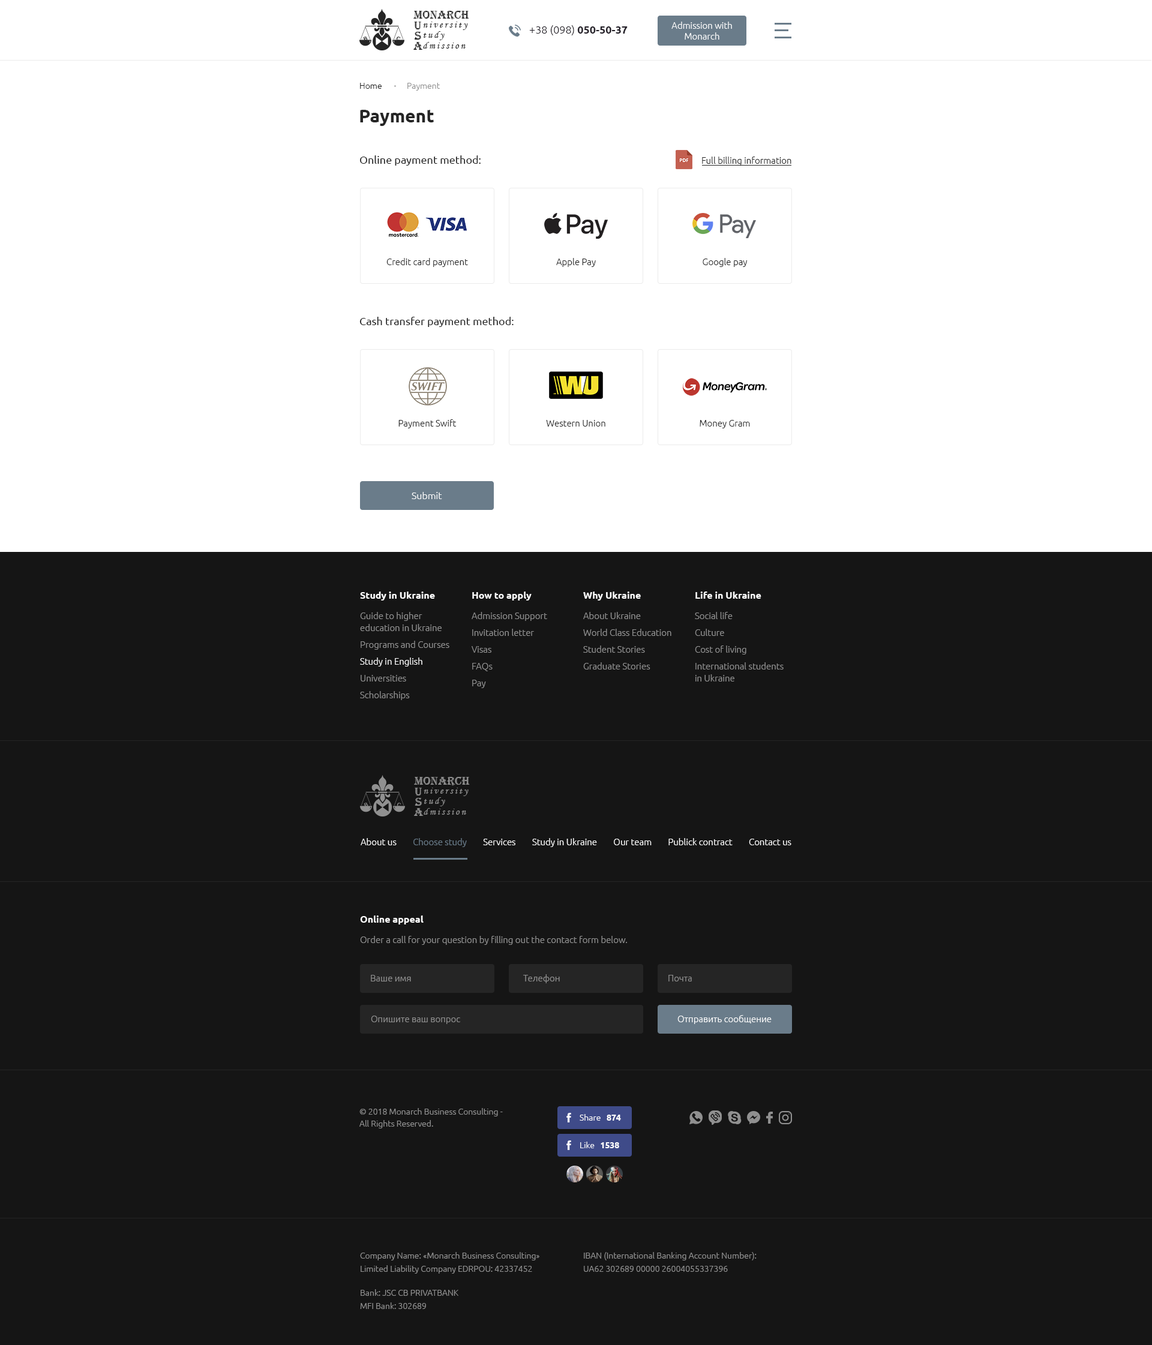
<style>
.page{position:relative;width:1152px;height:1345px;background:#151515}
.page>*{position:absolute;margin:0}
.t1{font:12px "Algerian";color:#252525}
.t2{font:9.6px "MonotypeCorsiva";letter-spacing:0.19em;color:#252525}
.t3{font:10.8px "Ubuntu-Light";color:#242028}
.t4{font:10.8px "Ubuntu-Bold";color:#242028}
.t5{font:9px/10.8px "Ubuntu-Light";color:#ffffff}
.t6{font:8.4px "Ubuntu-Light";color:#909090}
.t7{font:8.4px "Ubuntu-Light";color:#202020}
.t8{font:18px "Ubuntu-Bold";color:#252525}
.t9{font:10.8px "Ubuntu";color:#252525}
.t10{font:9px "Ubuntu-Light";color:#252525}
.t11{font:9.6px "Ubuntu-Light";color:#ffffff}
.t12{font:9px/16.8px "Ubuntu-Light";color:#909090}
.t13{font:9.6px/12px "Ubuntu-Bold";color:#ffffff}
.t14{font:9px/20.4px "Ubuntu-Light";color:#909090}
.t15{font:9px/12px "Ubuntu-Light";color:#909090}
.t16{font:9px/16.8px "Ubuntu-Light";color:#ffffff}
.t17{font:12px "Algerian";color:#909090}
.t18{font:9.6px "MonotypeCorsiva";letter-spacing:0.19em;color:#909090}
.t19{font:9px "Ubuntu-Light";color:#ffffff}
.t20{font:9px "Ubuntu-Light";color:#6a7c8a}
.t21{font:9px "Ubuntu-Light";color:#909090}
.t22{font:8.4px/12px "Ubuntu-Light";color:#909090}
.t23{font:8.4px "Ubuntu-Light";color:#ffffff}
.t24{font:8.4px "Ubuntu-Bold";color:#ffffff}
.t25{font:8.4px/13.2px "Ubuntu-Light";color:#909090}
</style>
<div class="page">
<p class="t1" style="left:413px;top:11px;width:56px;height:9px">MONARCH</p>
<p class="t1" style="left:414px;top:22px;width:7px;height:7px">U</p>
<p class="t2" style="left:423px;top:22px;width:45px;height:8px">niversity</p>
<p class="t3" style="left:529px;top:25px;width:99px;height:10px">+38 (098) <span class="t4">050-50-37</span></p>
<p class="t5" style="left:671px;top:22px;width:61px;height:18px;text-align:center">Admission with <br>Monarch</p>
<p class="t1" style="left:414px;top:32px;width:7px;height:8px">S</p>
<p class="t2" style="left:424px;top:31px;width:21px;height:9px">tudy</p>
<p class="t1" style="left:413px;top:42px;width:10px;height:8px">A</p>
<p class="t2" style="left:423px;top:42px;width:43px;height:7px">dmission</p>
<p class="t6" style="left:360px;top:83px;width:80px;height:8px"><span class="t7">Home             </span>Payment</p>
<p class="t8" style="left:360px;top:110px;width:74px;height:16px">Payment</p>
<p class="t9" style="left:360px;top:155px;width:121px;height:11px">Online payment method:</p>
<p class="t10" style="left:702px;top:157px;width:89px;height:9px">Full billing information</p>
<p class="t10" style="left:386px;top:258px;width:82px;height:9px">Credit card payment</p>
<p class="t10" style="left:556px;top:258px;width:40px;height:9px">Apple Pay</p>
<p class="t10" style="left:703px;top:258px;width:45px;height:9px">Google pay</p>
<p class="t9" style="left:359px;top:317px;width:155px;height:10px">Cash transfer payment method:</p>
<p class="t10" style="left:398px;top:419px;width:59px;height:9px">Payment Swift</p>
<p class="t10" style="left:546px;top:420px;width:59px;height:7px">Western Union</p>
<p class="t10" style="left:700px;top:420px;width:50px;height:8px">Money Gram</p>
<p class="t11" style="left:412px;top:492px;width:30px;height:7px">Submit</p>
<p class="t12" style="left:360px;top:592px;width:89px;height:108px"><span class="t13">Study in Ukraine<br></span><span class="t14">Guide to higher <br></span><span class="t15">education in Ukraine<br></span>Programs and Courses<br><span class="t16">Study in English<br></span>Universities<br>Scholarships</p>
<p class="t12" style="left:472px;top:592px;width:75px;height:96px"><span class="t13">How to apply<br></span><span class="t14">Admission Support<br></span>Invitation letter<br>Visas<br>FAQs<br>Pay</p>
<p class="t12" style="left:583px;top:592px;width:88px;height:78px"><span class="t13">Why Ukraine<br></span><span class="t14">About Ukraine<br></span>World Class Education<br>Student Stories<br>Graduate Stories</p>
<p class="t12" style="left:695px;top:592px;width:89px;height:90px"><span class="t13">Life in Ukraine<br></span><span class="t14">Social life<br></span>Culture<br>Cost of living<br>International students <br><span class="t15">in Ukraine</span></p>
<p class="t17" style="left:414px;top:777px;width:56px;height:9px">MONARCH</p>
<p class="t17" style="left:415px;top:798px;width:7px;height:8px">S</p>
<p class="t17" style="left:415px;top:788px;width:7px;height:8px">U</p>
<p class="t18" style="left:424px;top:788px;width:45px;height:8px">niversity</p>
<p class="t18" style="left:424px;top:797px;width:21px;height:9px">tudy</p>
<p class="t17" style="left:414px;top:808px;width:10px;height:8px">A</p>
<p class="t18" style="left:424px;top:808px;width:42px;height:7px">dmission</p>
<p class="t19" style="left:361px;top:838px;width:430px;height:9px">About us        <span class="t20">Choose study</span>        Services        Study in Ukraine        Our team        Publick contract        Contact us</p>
<p class="t14" style="left:360px;top:916px;width:267px;height:29px"><span class="t13">Online appeal<br></span>Order a call for your question by filling out the contact form below.</p>
<p class="t21" style="left:371px;top:975px;width:40px;height:7px">Ваше имя</p>
<p class="t21" style="left:523px;top:974px;width:37px;height:9px">Телефон</p>
<p class="t21" style="left:668px;top:975px;width:24px;height:7px">Почта</p>
<p class="t21" style="left:371px;top:1016px;width:89px;height:8px">Опишите ваш вопрос</p>
<p class="t19" style="left:677px;top:1015px;width:95px;height:9px">Отправить сообщение</p>
<p class="t22" style="left:359px;top:1108px;width:144px;height:21px">© 2018 Monarch Business Consulting - <br>All Rights Reserved.</p>
<p class="t23" style="left:580px;top:1114px;width:41px;height:7px">Share   <span class="t24">874</span></p>
<p class="t23" style="left:580px;top:1142px;width:39px;height:6px">Like   <span class="t24">1538</span></p>
<p class="t25" style="left:360px;top:1252px;width:179px;height:22px">Company Name: «Monarch Business Consulting»<br>Limited Liability Company EDRPOU: 42337452</p>
<p class="t25" style="left:584px;top:1252px;width:173px;height:20px">IBAN (International Banking Account Number): <br>UA62 302689 00000 26004055337396</p>
<p class="t25" style="left:360px;top:1289px;width:98px;height:20px">Bank: JSC CB PRIVATBANK<br>MFI Bank: 302689</p>
</div>
